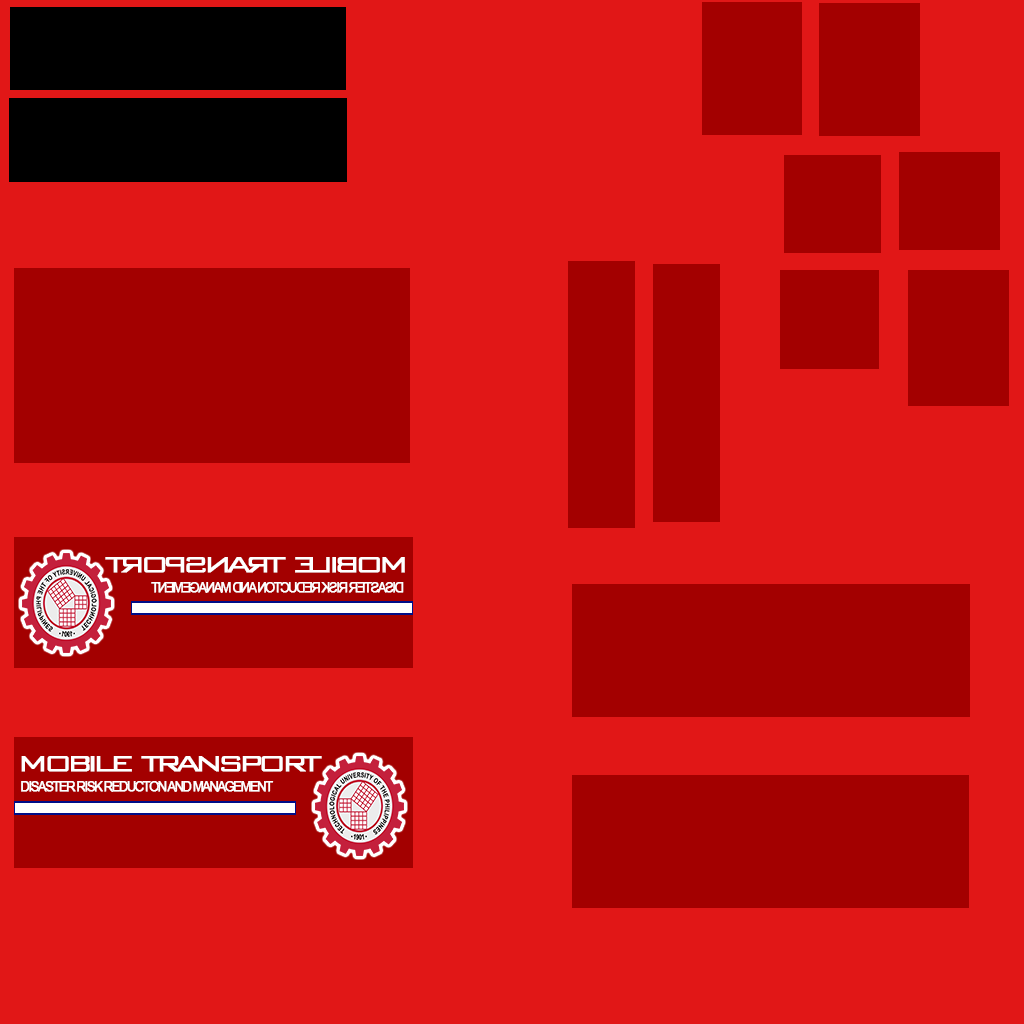
<style>
.page{position:relative;width:1024px;height:1024px;background:#e11717}
.page>*{position:absolute;margin:0}
.t1{font:28.8px "BankGothicBT-Light";letter-spacing:-0.2em;color:#ffffff;font-weight:bold;scale:1.19 1}
.t2{font:14.4px "ArialMT";letter-spacing:-0.12em;color:#ffffff;font-weight:bold;scale:0.88 1}
</style>
<div class="page">
<p class="t1" style="left:105px;top:557px;width:300px;height:16px;rotate:180deg">MOBILE  TRANSPORT</p>
<p class="t2" style="left:151px;top:582px;width:253px;height:11px;rotate:180deg">DISASTER RISK REDUCTON AND MANAGEMENT</p>
<p class="t1" style="left:21px;top:756px;width:301px;height:16px">MOBILE  TRANSPORT</p>
<p class="t2" style="left:21px;top:781px;width:253px;height:11px">DISASTER RISK REDUCTON AND MANAGEMENT</p>
</div>
